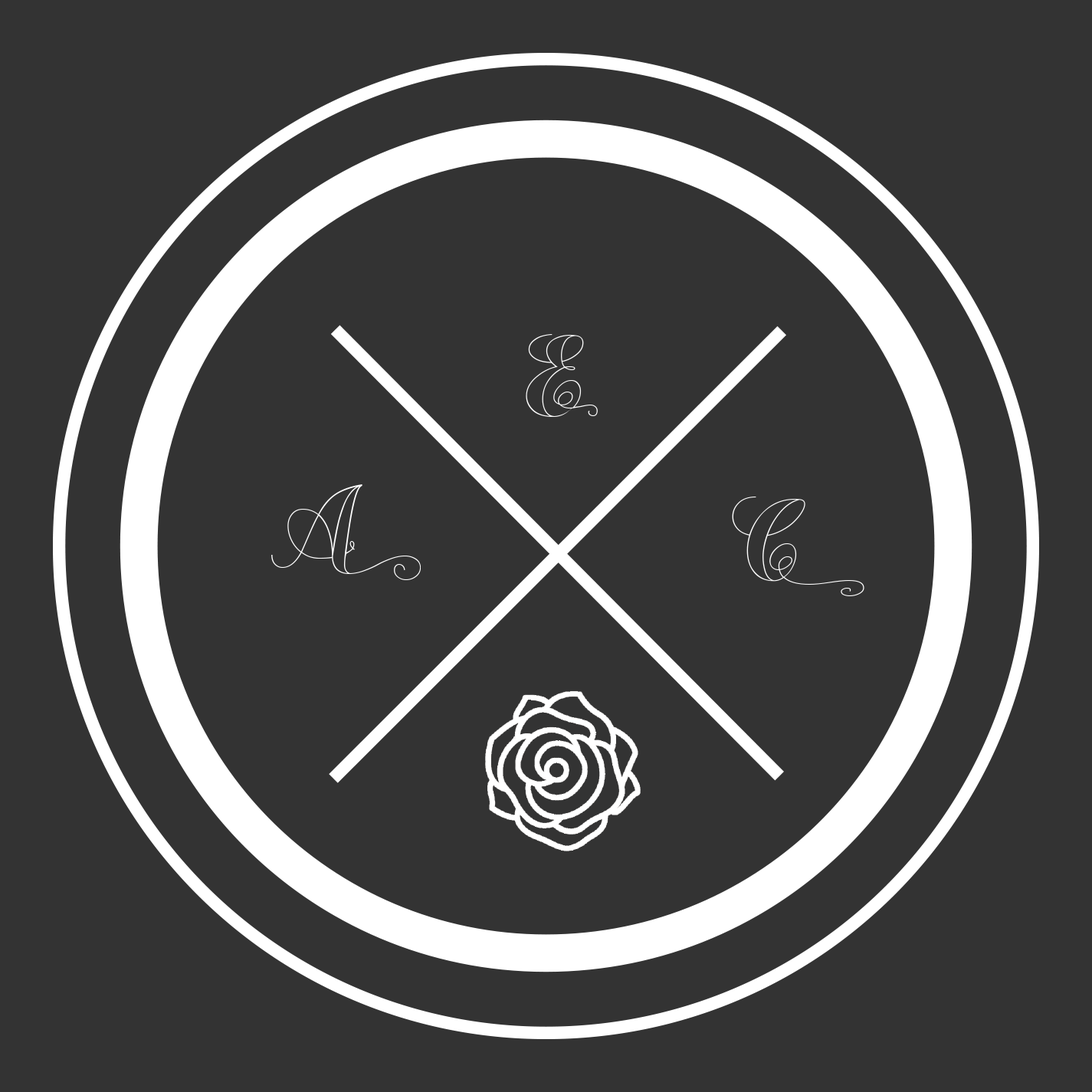
<style>
.page{position:relative;width:1092px;height:1092px;background:#333333}
.page>*{position:absolute;margin:0}
.t1{font:111.8px "Chameleon-Outline2";letter-spacing:0.075em;color:#ffffff}
</style>
<div class="page">
<p class="t1" style="left:526px;top:334px;width:72px;height:83px">E</p>
<p class="t1" style="left:271px;top:484px;width:150px;height:96px">A</p>
<p class="t1" style="left:732px;top:497px;width:132px;height:99px">C</p>
</div>
